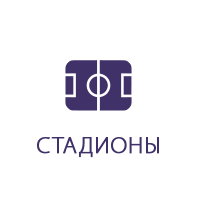
<style>
.page{position:relative;width:200px;height:200px;background:#ffffff}
.page>*{position:absolute;margin:0}
.t1{font:23.9px "MyriadPro-Light";letter-spacing:0.025em;color:#403168;font-variant:small-caps;font-weight:bold}
</style>
<div class="page">
<p class="t1" style="left:37px;top:137px;width:122px;height:21px">СТАДИОНЫ</p>
</div>
